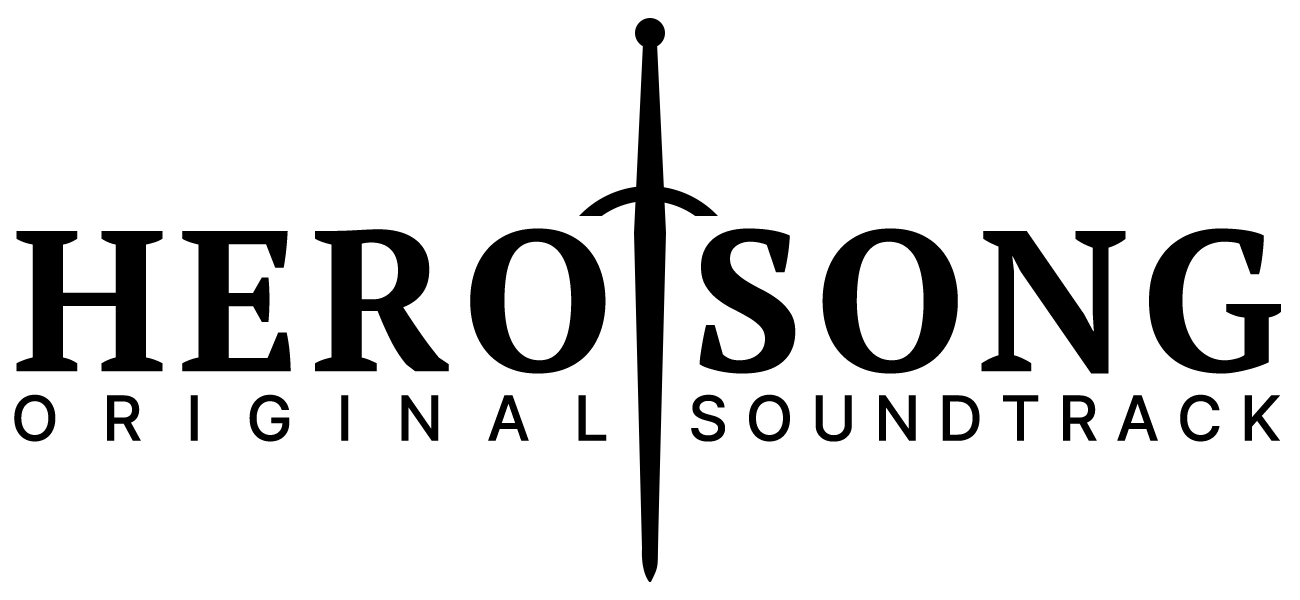
<style>
.page{position:relative;width:1300px;height:600px;background:#ffffff}
.page>*{position:absolute;margin:0}
.t1{font:200px "PTSerif-Bold";letter-spacing:0.06em;color:#000000}
.t2{font:62.2px "Inter-Medium";letter-spacing:0.74em;color:#000000}
.t3{font:62.2px "Inter-Medium";letter-spacing:0.28em;color:#000000}
</style>
<div class="page">
<p class="t1" style="left:16px;top:228px;width:1265px;height:146px">HERO SONG</p>
<p class="t2" style="left:14px;top:394px;width:593px;height:48px">ORIGINAL</p>
<p class="t3" style="left:691px;top:394px;width:589px;height:48px">SOUNDTRACK</p>
</div>
